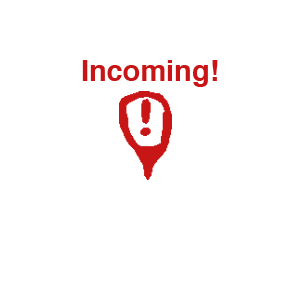
<style>
.page{position:relative;width:300px;height:300px;background:#ffffff}
.page>*{position:absolute;margin:0}
.t1{font:29px "Helvetica-Bold";color:#c81515}
</style>
<div class="page">
<p class="t1" style="left:82px;top:60px;width:136px;height:27px">Incoming!</p>
</div>
